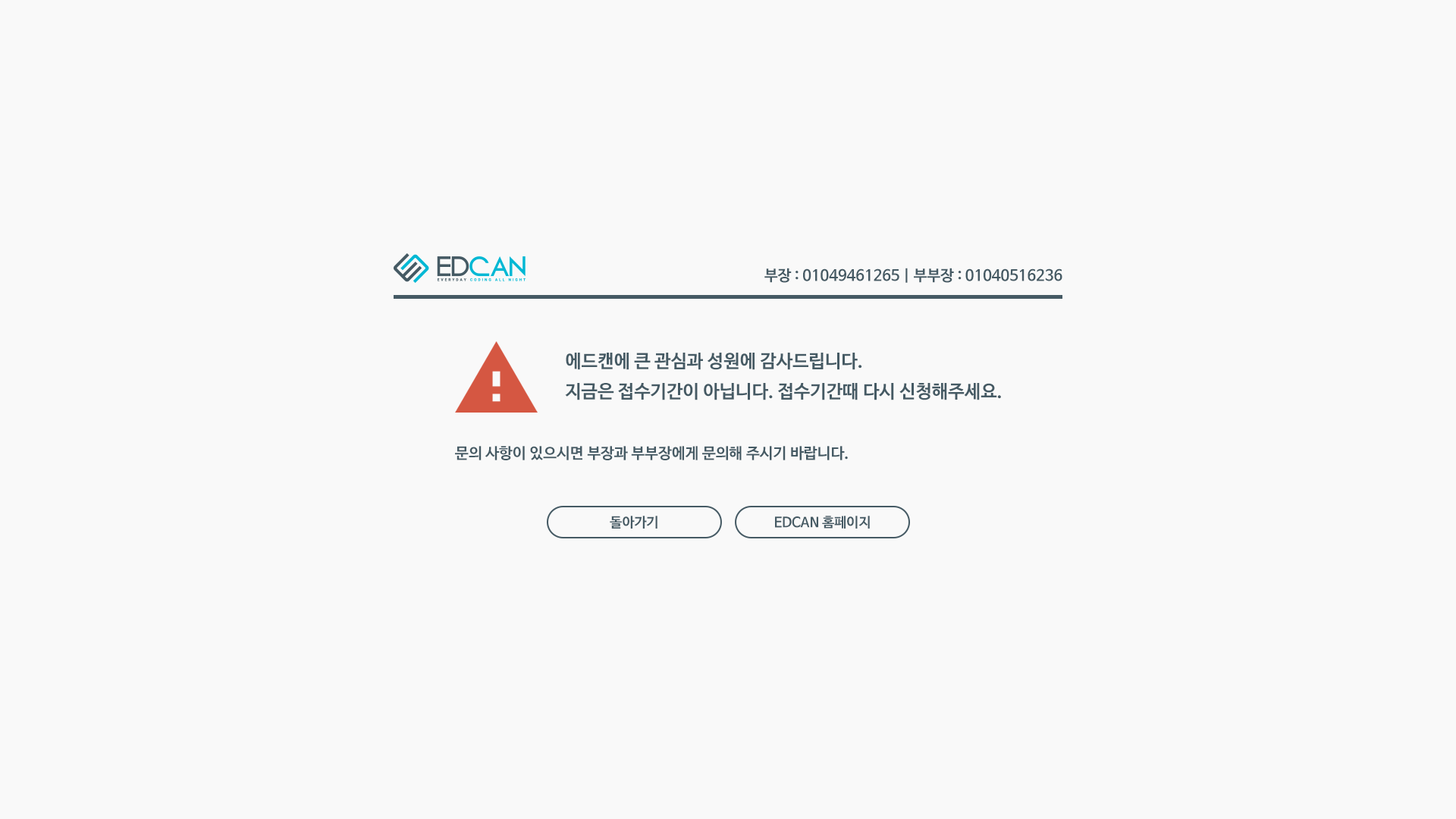
<style>
.page{position:relative;width:1456px;height:819px;background:#f9f9f9}
.page>*{position:absolute;margin:0}
.t1{font:15.2px "NanumBarunGothicBold";color:#455a64}
.t2{font:18.2px/30.4px "NanumBarunGothicBold";color:#455a64}
.t3{font:13.6px "NanumBarunGothicBold";color:#455a64}
</style>
<div class="page">
<p class="t1" style="left:764px;top:268px;width:298px;height:15px">부장 : 01049461265 | 부부장 : 01040516236</p>
<p class="t2" style="left:565px;top:353px;width:436px;height:47px">에드캔에 큰 관심과 성원에 감사드립니다.<br>지금은 접수기간이 아닙니다. 접수기간때 다시 신청해주세요.</p>
<p class="t1" style="left:455px;top:446px;width:393px;height:14px">문의 사항이 있으시면 부장과 부부장에게 문의해 주시기 바랍니다.</p>
<p class="t3" style="left:610px;top:516px;width:47px;height:13px">돌아가기</p>
<p class="t3" style="left:775px;top:516px;width:95px;height:13px">EDCAN 홈페이지</p>
</div>
